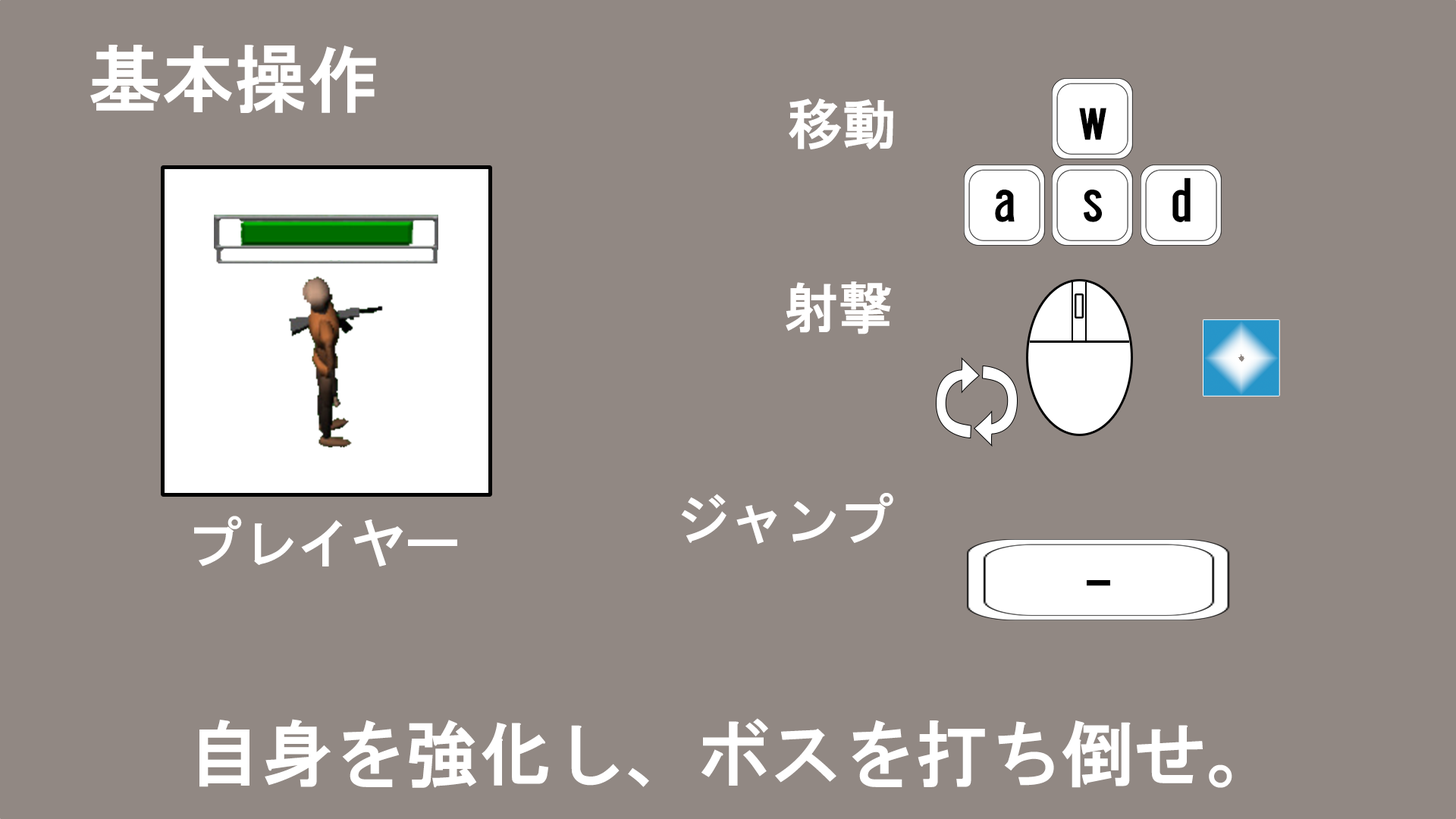
<style>
.page{position:relative;width:1456px;height:819px;background:#918883}
.page>*{position:absolute;margin:0}
.t1{font:72.8px "HGGothicE";color:#ffffff}
.t2{font:54.6px "HGGothicE";color:#ffffff}
.t3{font:54.6px "HGGothicE";color:#000000}
</style>
<div class="page">
<p class="t1" style="left:90px;top:45px;width:286px;height:68px">基本操作</p>
<p class="t2" style="left:789px;top:99px;width:104px;height:51px">移動</p>
<p class="t3" style="left:1079px;top:108px;width:27px;height:32px">w</p>
<p class="t3" style="left:1172px;top:177px;width:19px;height:45px">d</p>
<p class="t3" style="left:995px;top:190px;width:20px;height:32px">a</p>
<p class="t3" style="left:1084px;top:190px;width:18px;height:32px">s</p>
<p class="t2" style="left:786px;top:281px;width:105px;height:53px">射撃</p>
<p class="t2" style="left:681px;top:493px;width:212px;height:51px">ジャンプ</p>
<p class="t2" style="left:194px;top:516px;width:263px;height:50px">プレイヤー</p>
<p class="t3" style="left:1087px;top:580px;width:23px;height:6px">-</p>
<p class="t1" style="left:199px;top:718px;width:1033px;height:70px">自身を強化し、ボスを打ち倒せ。</p>
</div>
